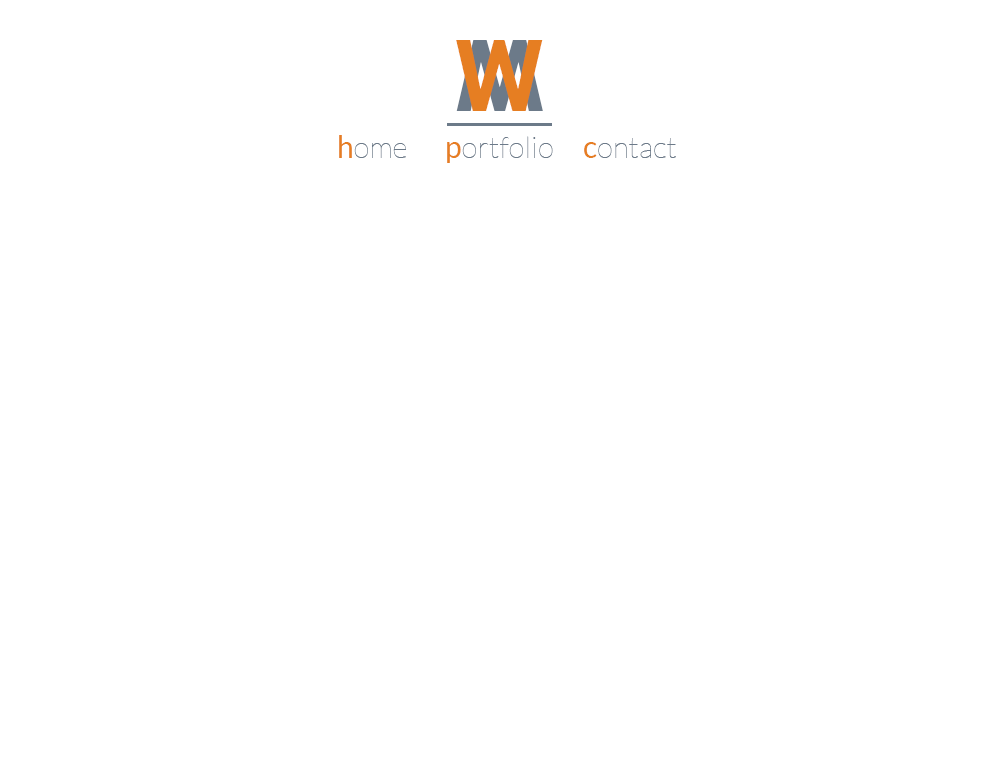
<style>
.page{position:relative;width:1000px;height:776px;background:#ffffff}
.page>*{position:absolute;margin:0}
.t1{font:100.3px "Roboto-Bold"}
.t2{font:100px "Roboto-Bold";color:#e67e22}
.t3{font:30px "Lato-Hairline";color:#6c7a89}
.t4{font:30px "Lato-Regular";color:#e67e22}
</style>
<div class="page">
<p class="t1" style="left:456px;top:40px;width:87px;height:71px;rotate:180deg">W</p>
<p class="t2" style="left:456px;top:40px;width:87px;height:71px">W</p>
<p class="t3" style="left:339px;top:135px;width:67px;height:23px"><span class="t4">h</span>ome</p>
<p class="t3" style="left:447px;top:136px;width:106px;height:27px"><span class="t4">p</span>ortfolio</p>
<p class="t3" style="left:584px;top:138px;width:92px;height:20px"><span class="t4">c</span>ontact</p>
</div>
